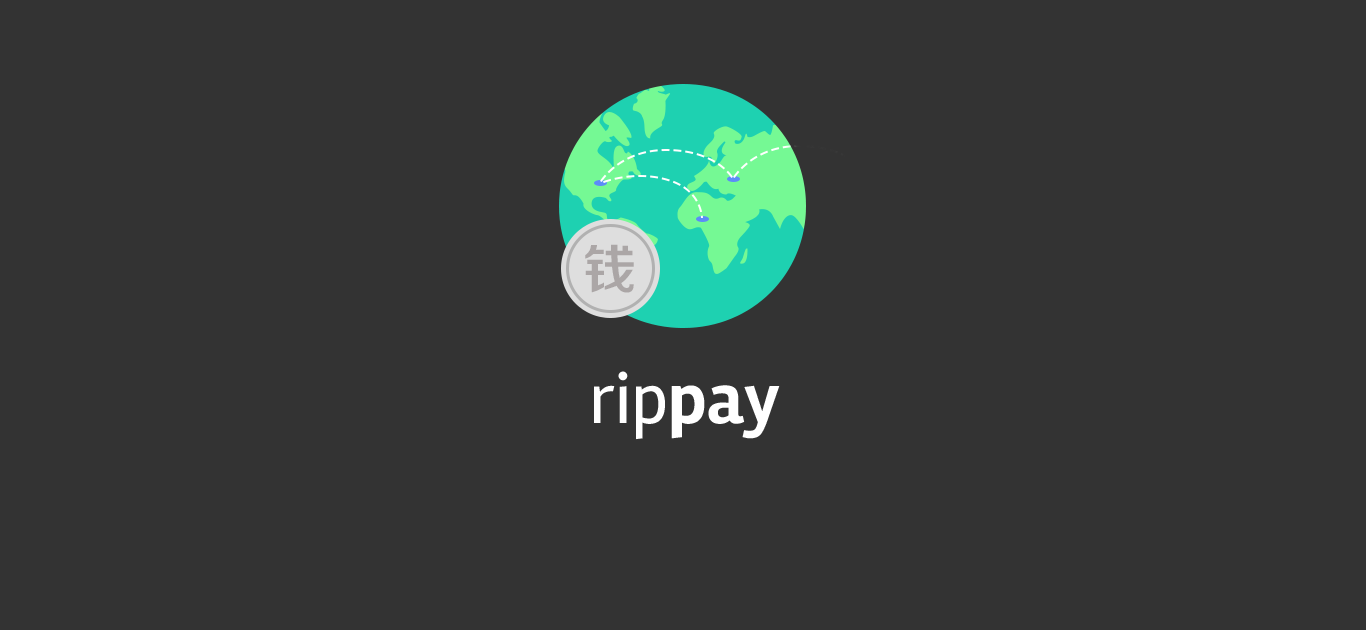
<style>
.page{position:relative;width:1366px;height:630px;background:#333333}
.page>*{position:absolute;margin:0}
.t1{font:53.7px "FZZZHONGJW--GB1-0";color:#aba6a6}
.t2{font:72px "Rambla-Regular";color:#ffffff}
.t3{font:72px "Rambla-Bold";color:#ffffff}
</style>
<div class="page">
<p class="t1" style="left:585px;top:244px;width:49px;height:49px">钱</p>
<p class="t2" style="left:594px;top:371px;width:186px;height:69px">rip<span class="t3">pay</span></p>
</div>
